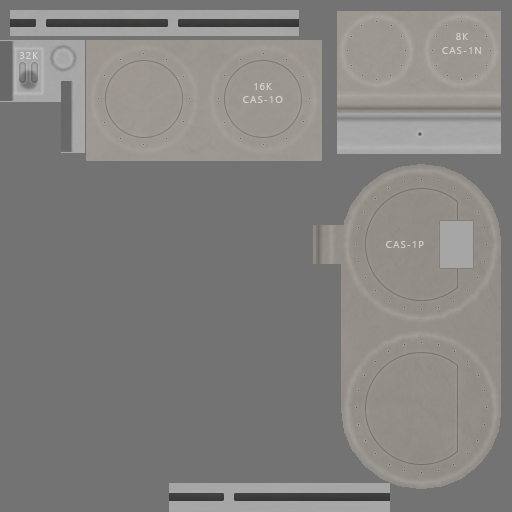
<style>
.page{position:relative;width:512px;height:512px;background:#737373}
.page>*{position:absolute;margin:0}
.t1{font:10px "SegoeUI";letter-spacing:0.1em;color:#d1cfcc}
.t2{font:10px "SegoeUI";letter-spacing:0.1em;color:#d6d6d6}
.t3{font:10px "SegoeUI";letter-spacing:0.1em;color:#cdccc9}
</style>
<div class="page">
<p class="t1" style="left:456px;top:33px;width:12px;height:7px">8K</p>
<p class="t2" style="left:20px;top:52px;width:18px;height:7px">32K</p>
<p class="t1" style="left:442px;top:47px;width:39px;height:7px">CAS-1N</p>
<p class="t1" style="left:254px;top:83px;width:18px;height:7px">16K</p>
<p class="t1" style="left:243px;top:96px;width:40px;height:7px">CAS-1O</p>
<p class="t3" style="left:386px;top:241px;width:38px;height:7px">CAS-1P</p>
</div>
